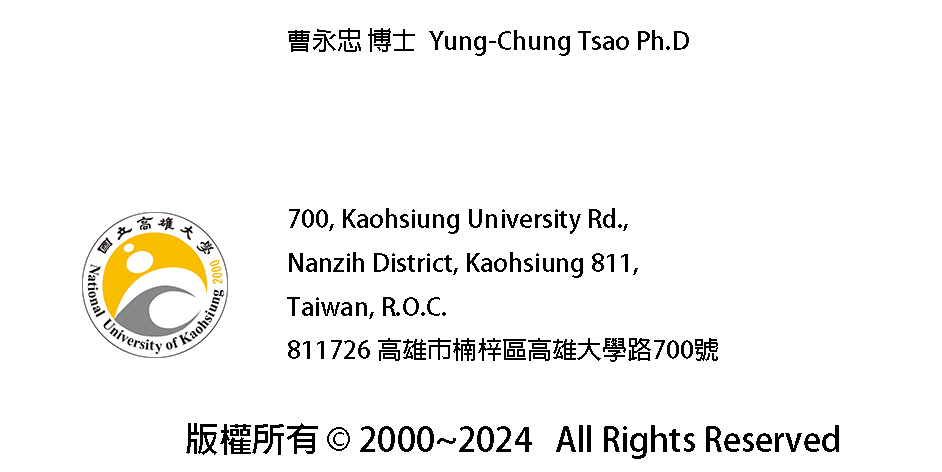
<style>
.page{position:relative;width:942px;height:472px;background:#ffffff}
.page>*{position:absolute;margin:0}
.t1{font:25px "AdobeFanHeitiStd-Bold";color:#000000}
.t2{font:33.3px "AdobeFanHeitiStd-Bold";color:#000000}
</style>
<div class="page">
<p class="t1" style="left:288px;top:28px;width:401px;height:28px">曹永忠 博士  Yung-Chung Tsao Ph.D</p>
<p class="t1" style="left:287px;top:208px;width:431px;height:154px">700, Kaohsiung University Rd., <br>Nanzih District, Kaohsiung 811, <br>Taiwan, R.O.C.<br>811726 高雄市楠梓區高雄大學路700號</p>
<p class="t2" style="left:186px;top:423px;width:653px;height:36px">版權所有 © 2000~2024   All Rights Reserved</p>
</div>
